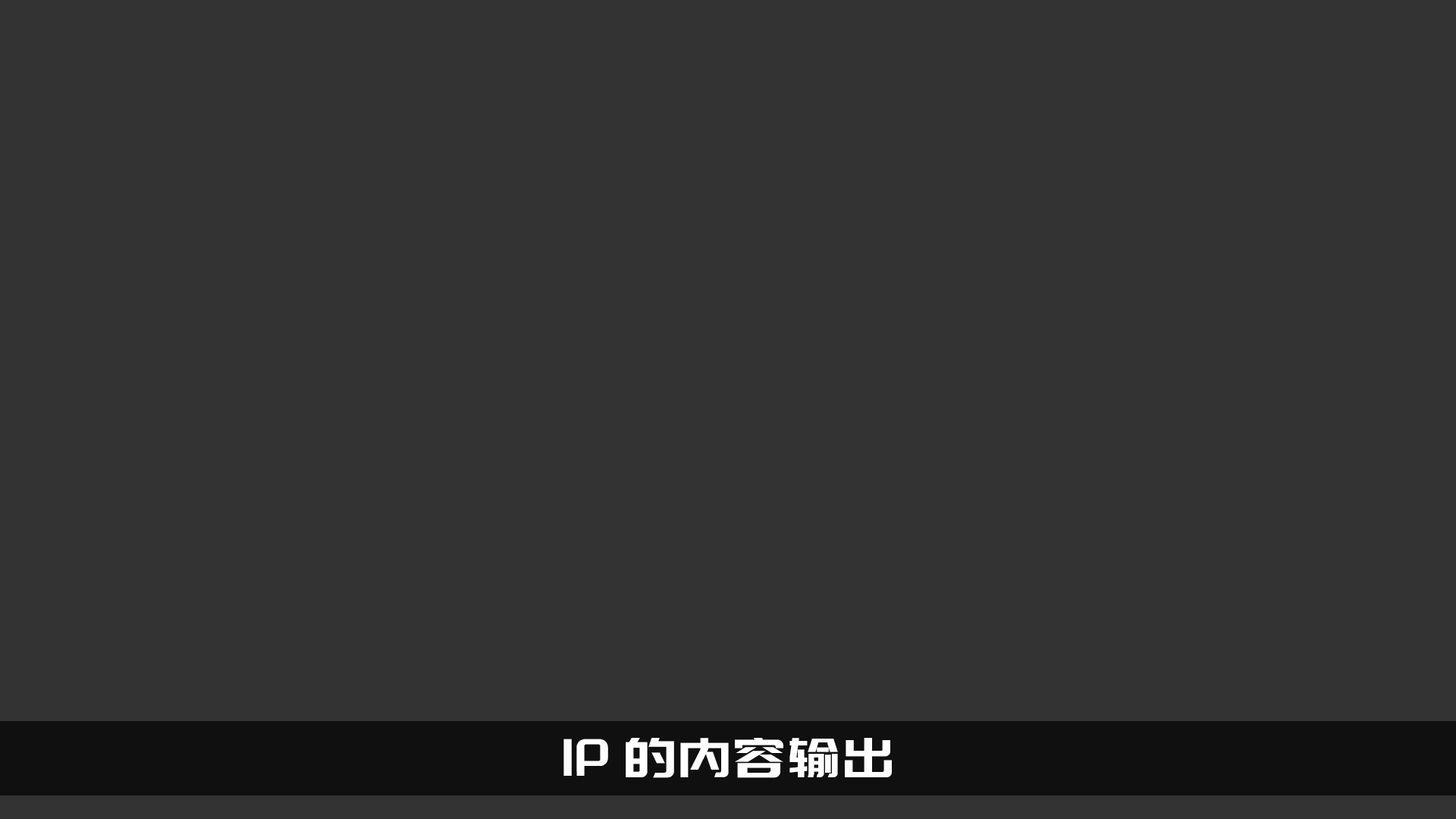
<style>
.page{position:relative;width:1456px;height:819px;background:#333333}
.page>*{position:absolute;margin:0}
.t1{font:54.6px "PangMenZhengDao-3";color:#ffffff}
</style>
<div class="page">
<p class="t1" style="left:563px;top:738px;width:329px;height:40px">IP的内容输出</p>
</div>
